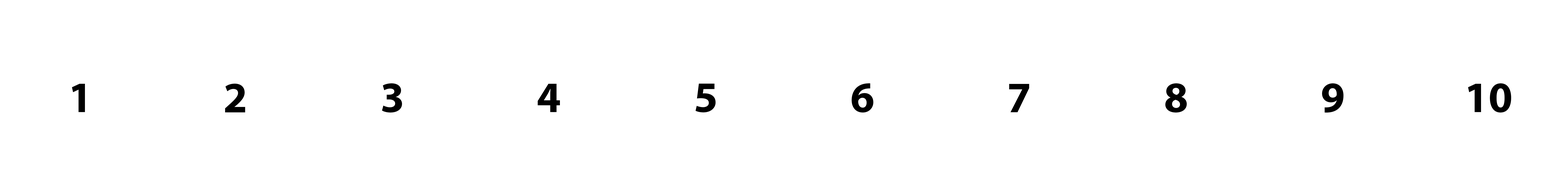
<style>
.page{position:relative;width:1568px;height:196px;background:#ffffff}
.page>*{position:absolute;margin:0}
.t1{font:43.6px "MyriadPro-Bold";color:#000000}
</style>
<div class="page">
<p class="t1" style="left:72px;top:84px;width:13px;height:28px">1</p>
<p class="t1" style="left:225px;top:84px;width:20px;height:28px">2</p>
<p class="t1" style="left:382px;top:83px;width:20px;height:30px">3</p>
<p class="t1" style="left:538px;top:84px;width:22px;height:28px">4</p>
<p class="t1" style="left:695px;top:84px;width:21px;height:29px">5</p>
<p class="t1" style="left:852px;top:83px;width:21px;height:30px">6</p>
<p class="t1" style="left:1009px;top:84px;width:20px;height:28px">7</p>
<p class="t1" style="left:1165px;top:83px;width:22px;height:30px">8</p>
<p class="t1" style="left:1322px;top:83px;width:22px;height:30px">9</p>
<p class="t1" style="left:1468px;top:83px;width:43px;height:30px">10</p>
</div>
